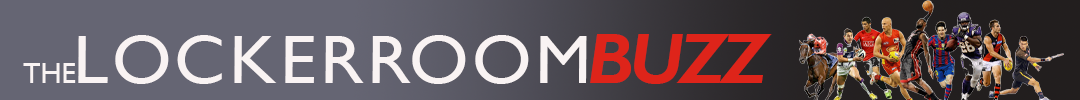
<style>
.page{position:relative;width:1080px;height:100px;background:#656573}
.page>*{position:absolute;margin:0}
.t1{font:68.9px "GillSansMT";letter-spacing:0.05em;color:#f9f3f3;scale:1.05 1}
.t2{font:71.8px "GillSansMT-BoldItalic";letter-spacing:-0.05em;color:#de241a}
.t3{font:28.7px "GillSansMT";color:#f9f3f3}
</style>
<div class="page">
<p class="t1" style="left:78px;top:35px;width:509px;height:49px">LOCKERROOM</p>
<p class="t2" style="left:590px;top:34px;width:182px;height:50px">BUZZ</p>
<p class="t3" style="left:23px;top:63px;width:53px;height:20px">THE</p>
</div>
